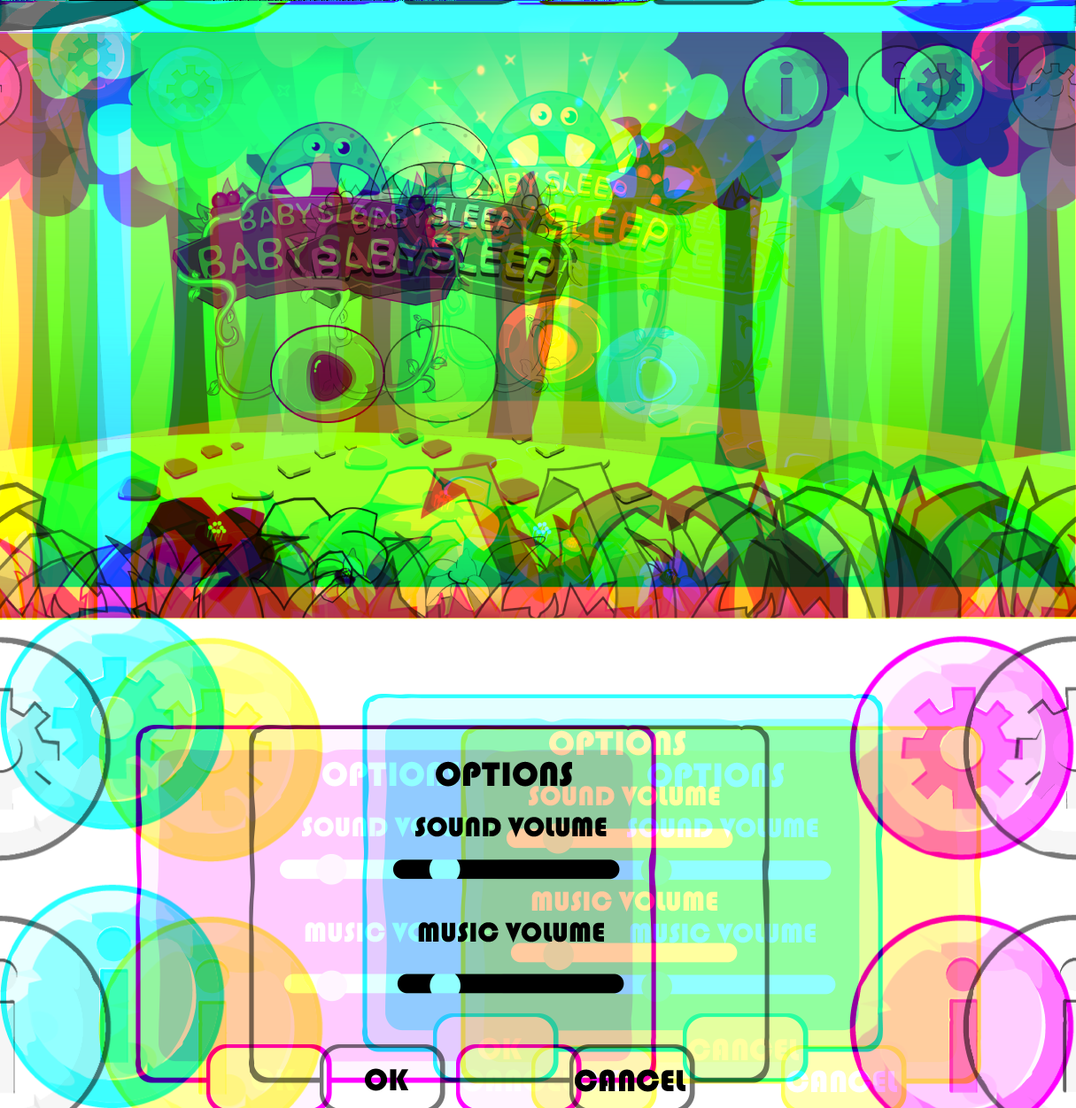
<style>
.page{position:relative;width:1076px;height:1108px}
.page>*{position:absolute;margin:0}
.t1{font:35.2px "STHupo";color:#fff5b3}
.t2{font:28.3px "STHupo"}
.t3{font:31.6px "STHupo"}
</style>
<div class="page">
<p class="t1" style="left:549px;top:730px;width:136px;height:25px">OPTIONS</p>
<p class="t2" style="left:529px;top:785px;width:191px;height:22px">SOUND VOLUME</p>
<p class="t2" style="left:531px;top:891px;width:186px;height:21px">MUSIC VOLUME</p>
<p class="t3" style="left:478px;top:1037px;width:43px;height:23px">OK</p>
</div>
